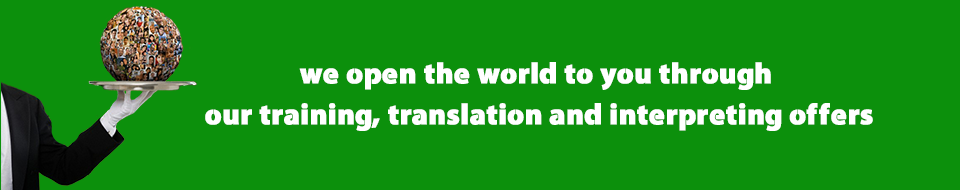
<style>
.page{position:relative;width:960px;height:190px;background:#0c900c}
.page>*{position:absolute;margin:0}
.t1{font:29.2px/40.9px "Cleanvertising-Black";color:#ffffff;font-weight:bold}
</style>
<div class="page">
<p class="t1" style="left:205px;top:62px;width:668px;height:69px;text-align:center">we open the world to you through <br>our training, translation and interpreting offers</p>
</div>
